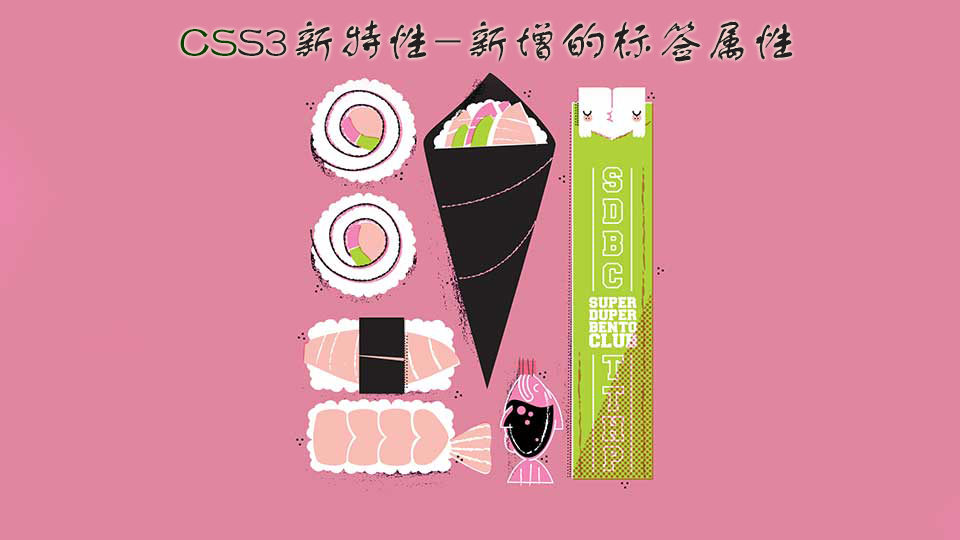
<style>
.page{position:relative;width:960px;height:540px;background:#e086a0}
.page>*{position:absolute;margin:0}
.t1{font:48px "FZSTK--GBK1-0";color:#231f20}
.t2{font:48px "FZSTK--GBK1-0";color:#0f3f00}
</style>
<div class="page">
<p class="t1" style="left:180px;top:20px;width:613px;height:42px"><span class="t2">CS</span>S3新特性-新增的标签属性</p>
</div>
